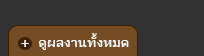
<style>
.page{position:relative;width:204px;height:56px;background:#333333}
.page>*{position:absolute;margin:0}
.t1{font:14.7px "DokChampa";color:#ffffff}
.t2{font:12.9px "DokChampa";color:#ffffff;scale:1.1 1}
</style>
<div class="page">
<p class="t1" style="left:21px;top:40px;width:8px;height:7px">+</p>
<p class="t2" style="left:39px;top:33px;width:90px;height:17px">ดูผลงานทั้งหมด</p>
</div>
